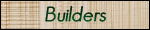
<style>
.page{position:relative;width:150px;height:30px}
.page>*{position:absolute;margin:0}
.t1{font:20px "GeosansLight-Oblique";color:#003d19;font-weight:bold}
</style>
<div class="page">
<p class="t1" style="left:45px;top:6px;width:61px;height:16px">Builders</p>
</div>
